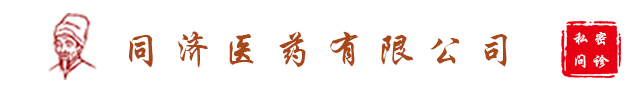
<style>
.page{position:relative;width:640px;height:88px;background:#ffffff}
.page>*{position:absolute;margin:0}
.t1{font:39px "STXingkai";letter-spacing:0.3em;color:#a84718}
.t2{font:16px/23px "STXingkai";letter-spacing:0.3em;color:#fbfbfb}
</style>
<div class="page">
<p class="t1" style="left:129px;top:31px;width:378px;height:37px">同济医药有限公司</p>
<p class="t2" style="left:573px;top:32px;width:37px;height:36px;text-align:center">私密<br>问诊</p>
</div>
